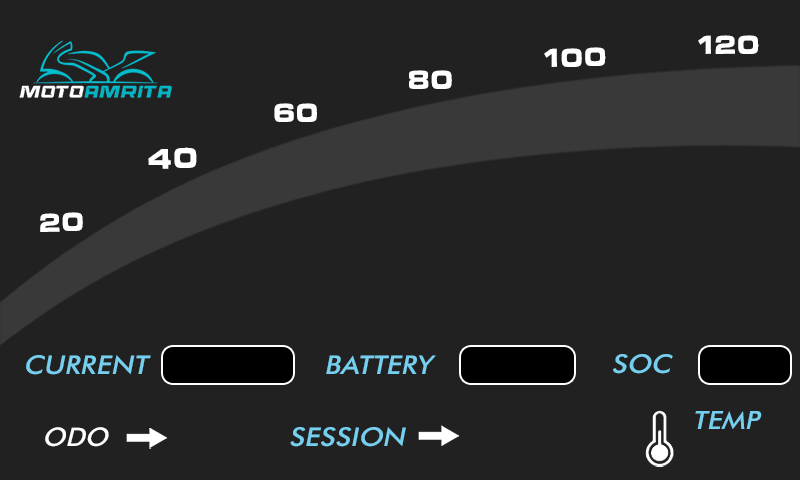
<style>
.page{position:relative;width:800px;height:480px;background:#212121}
.page>*{position:absolute;margin:0}
.t1{font:26.5px "EurostileUnicaseLTW04-Rg";color:#ffffff;scale:0.87 1}
.t2{font:29.1px "EurostileUnicaseLTW04-Rg";color:#ffffff;scale:0.87 1}
.t3{font:26.4px "FuturaBT-Medium";color:#77cfef;scale:1.06 1}
.t4{font:25.8px "FuturaBT-Medium";color:#77cfef;scale:1.06 1}
.t5{font:26.3px "FuturaBT-Medium";color:#ffffff}
</style>
<div class="page">
<p class="t1" style="left:698px;top:35px;width:61px;height:19px;rotate:-1deg">120</p>
<p class="t1" style="left:544px;top:47px;width:62px;height:20px;rotate:-1deg">100</p>
<p class="t1" style="left:409px;top:70px;width:43px;height:19px;rotate:-1deg">80</p>
<p class="t1" style="left:274px;top:103px;width:43px;height:19px;rotate:-1deg">60</p>
<p class="t2" style="left:148px;top:147px;width:49px;height:22px;rotate:-1deg">40</p>
<p class="t1" style="left:40px;top:212px;width:43px;height:20px;rotate:-1deg">20</p>
<p class="t3" style="left:26px;top:355px;width:125px;height:20px">CURRENT</p>
<p class="t3" style="left:326px;top:355px;width:110px;height:19px">BATTERY</p>
<p class="t3" style="left:613px;top:354px;width:60px;height:20px">SOC</p>
<p class="t4" style="left:695px;top:411px;width:67px;height:18px">TEMP</p>
<p class="t5" style="left:45px;top:427px;width:64px;height:20px">ODO</p>
<p class="t3" style="left:290px;top:427px;width:116px;height:20px">SESSION</p>
</div>
